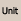
<style>
.page{position:relative;width:21px;height:21px;background:#d9cdc1}
.page>*{position:absolute;margin:0}
.t1{font:9px "Tahoma";color:#000000}
</style>
<div class="page">
<p class="t1" style="left:2px;top:7px;width:16px;height:8px">Unit</p>
</div>
